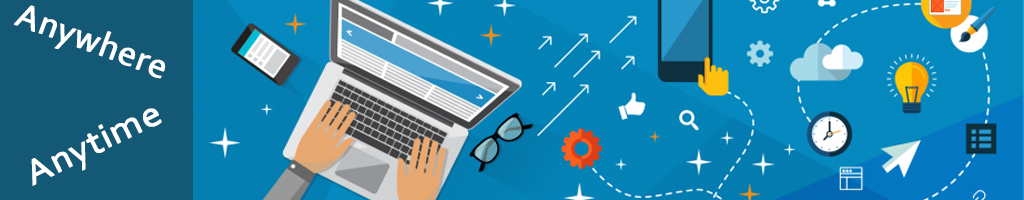
<style>
.page{position:relative;width:1024px;height:200px}
.page>*{position:absolute;margin:0}
.t1{font:36px "Corbel";color:#ffffff;font-weight:bold}
.t2{font:35.6px "Corbel";color:#ffffff;font-weight:bold;scale:1.1 1}
</style>
<div class="page">
<p class="t1" style="left:13px;top:5px;width:153px;height:74px;rotate:20deg">Anywhere</p>
<p class="t2" style="left:31px;top:108px;width:131px;height:78px;rotate:-26deg">Anytime</p>
</div>
